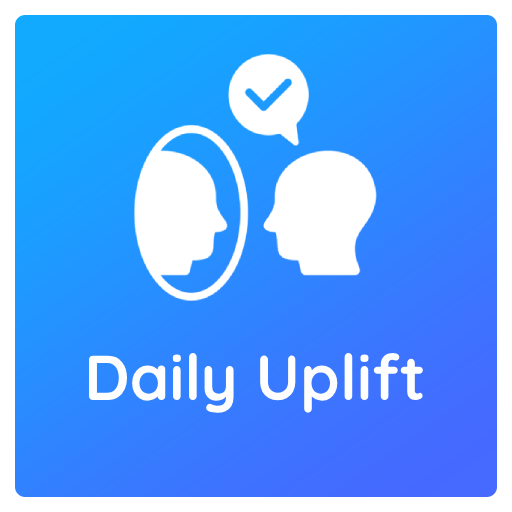
<style>
.page{position:relative;width:512px;height:512px;background:#ffffff}
.page>*{position:absolute;margin:0}
.t1{font:63.4px "Quicksand-Bold";color:#fefefe}
</style>
<div class="page">
<p class="t1" style="left:89px;top:353px;width:334px;height:60px">Daily Uplift</p>
</div>
